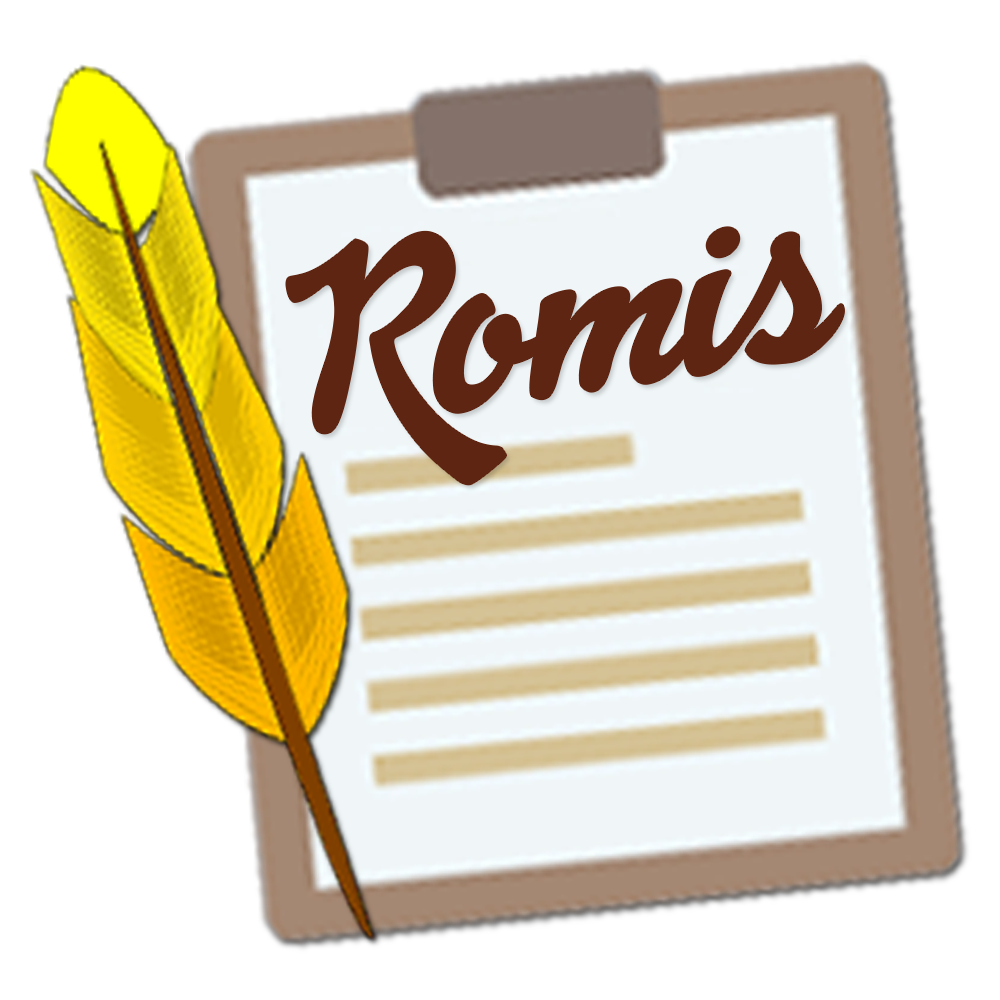
<style>
.page{position:relative;width:1000px;height:1000px;background:#ffffff}
.page>*{position:absolute;margin:0}
.t1{font:227.8px "AdvertisingScript-Bold";color:#5f2513}
</style>
<div class="page">
<p class="t1" style="left:286px;top:227px;width:558px;height:258px;rotate:-9deg">Romis</p>
</div>
